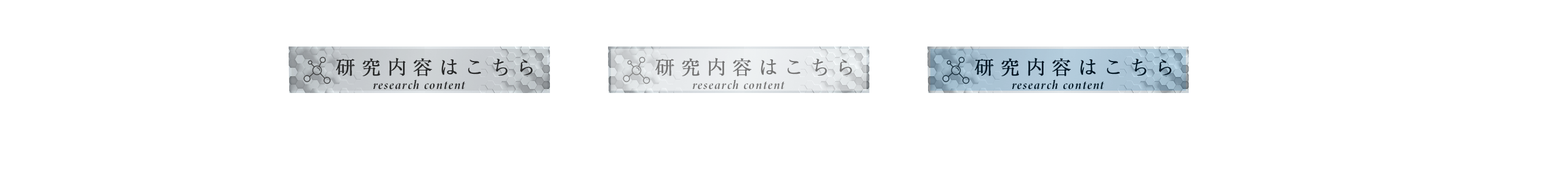
<style>
.page{position:relative;width:1568px;height:186px;background:#ffffff}
.page>*{position:absolute;margin:0}
.t1{font:19.2px "RyuminPr6N-Light";letter-spacing:0.32em;color:#272828;font-weight:bold}
.t2{font:19.2px "RyuminPr6N-Light";letter-spacing:0.32em;color:#737373;font-weight:bold}
.t3{font:19.2px "RyuminPr6N-Light";letter-spacing:0.32em;color:#011624;font-weight:bold}
.t4{font:12.8px "MinionConceptItalic-DisplayBoldItalic";letter-spacing:0.08em;color:#272828;font-weight:bold}
.t5{font:12.8px "MinionConceptItalic-DisplayBoldItalic";letter-spacing:0.08em;color:#737373;font-weight:bold}
.t6{font:12.8px "MinionConceptItalic-DisplayBoldItalic";letter-spacing:0.08em;color:#011624;font-weight:bold}
</style>
<div class="page">
<p class="t1" style="left:336px;top:57px;width:197px;height:19px">研究内容はこちら</p>
<p class="t2" style="left:655px;top:57px;width:197px;height:19px">研究内容はこちら</p>
<p class="t3" style="left:974px;top:57px;width:197px;height:19px">研究内容はこちら</p>
<p class="t4" style="left:373px;top:80px;width:93px;height:9px">research content</p>
<p class="t5" style="left:693px;top:80px;width:92px;height:9px">research content</p>
<p class="t6" style="left:1012px;top:80px;width:93px;height:9px">research content</p>
</div>
